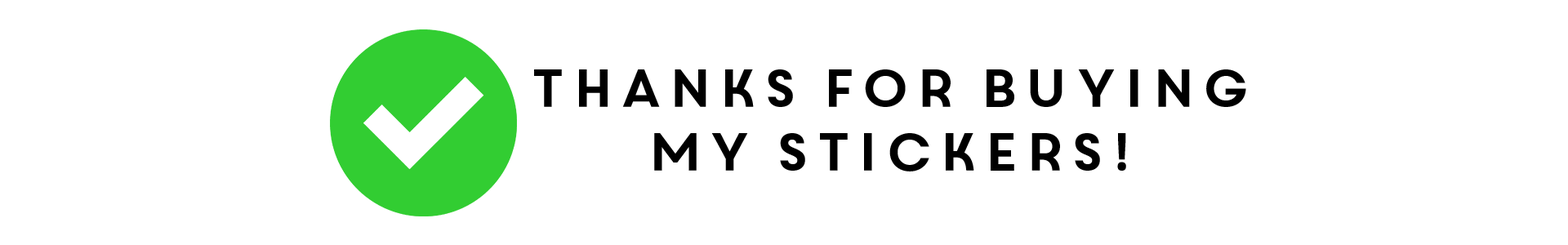
<style>
.page{position:relative;width:1568px;height:245px;background:#ffffff}
.page>*{position:absolute;margin:0}
.t1{font:53.1px "CoreCircus";color:#000000}
</style>
<div class="page">
<p class="t1" style="left:534px;top:69px;width:712px;height:103px;text-align:center">thanks for buying<br>my stickers!</p>
</div>
